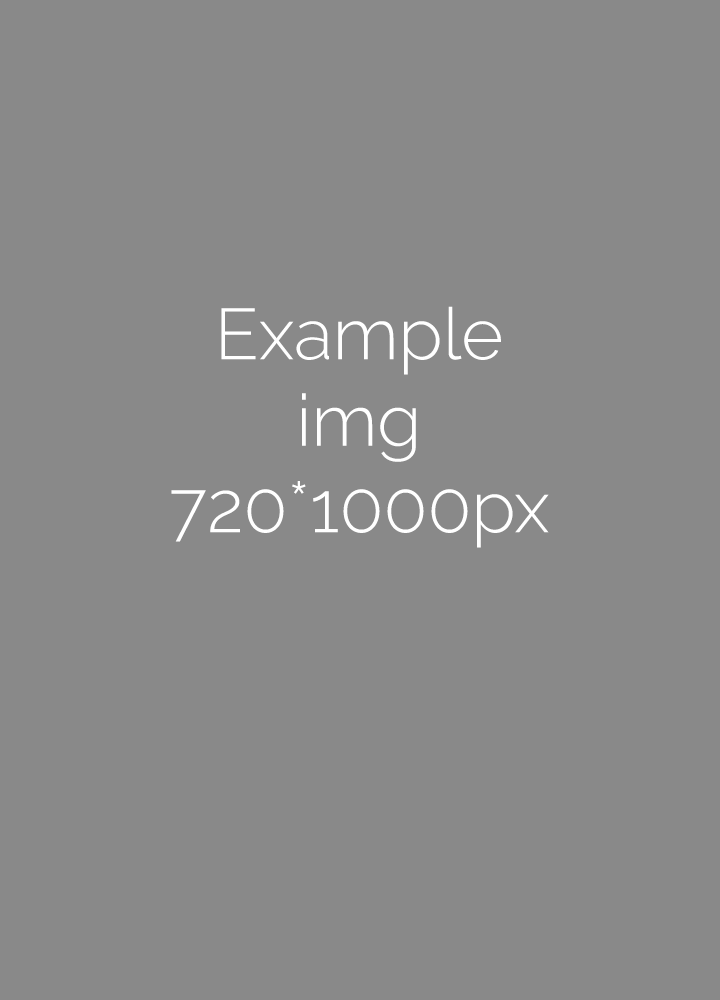
<style>
.page{position:relative;width:720px;height:1000px;background:#898989}
.page>*{position:absolute;margin:0}
.t1{font:72px "Raleway-Light";color:#ffffff}
</style>
<div class="page">
<p class="t1" style="left:171px;top:306px;width:378px;height:242px;text-align:center">Example<br>img<br>720*1000px</p>
</div>
